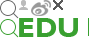
<style>
.page{position:relative;width:89px;height:40px;background:#ffffff}
.page>*{position:absolute;margin:0}
.t1{font:28px "GillSansMT-Bold";color:#39a030}
</style>
<div class="page">
<p class="t1" style="left:19px;top:18px;width:59px;height:19px">EDU</p>
</div>
